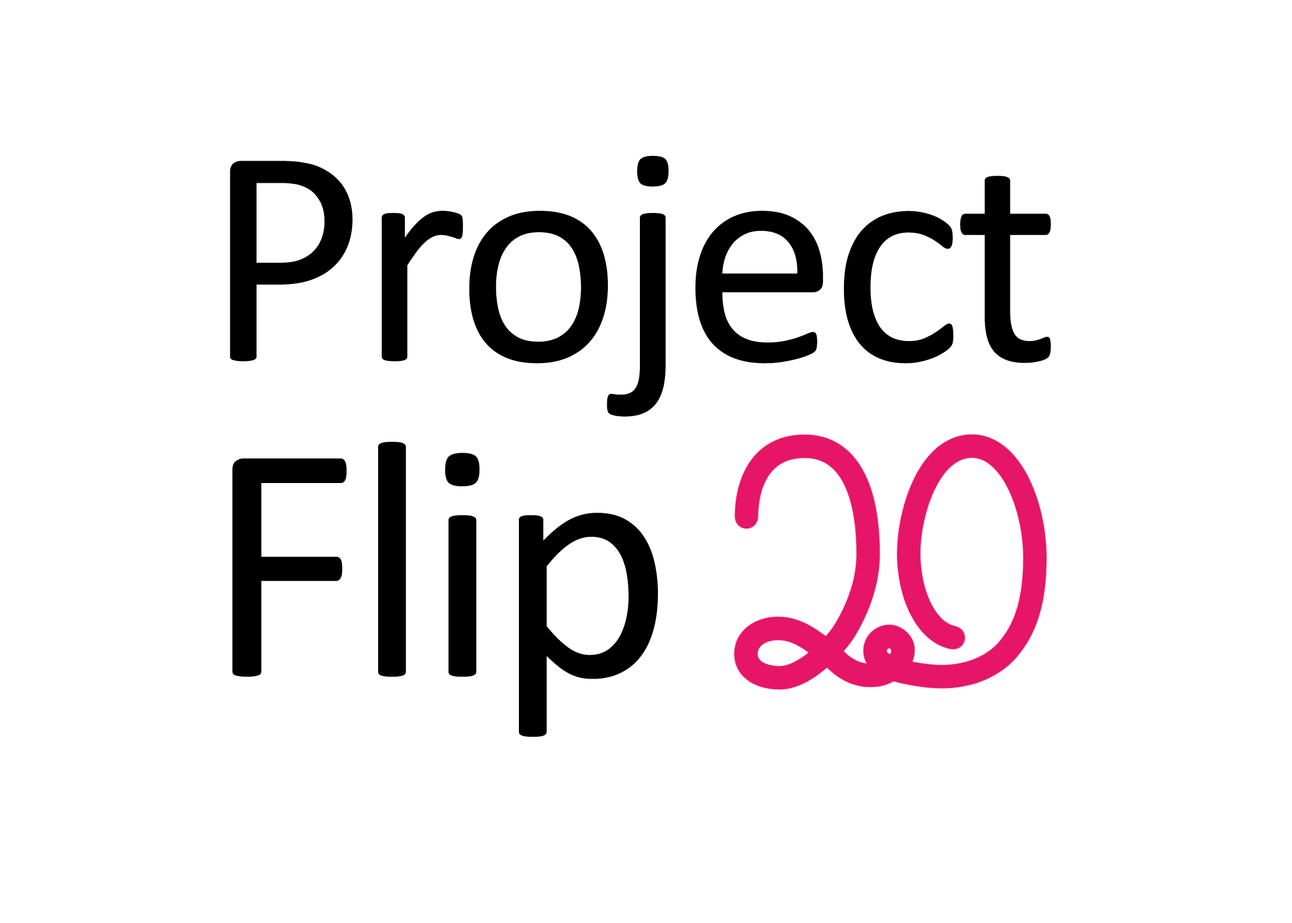
<style>
.page{position:relative;width:1292px;height:923px;background:#ffffff}
.page>*{position:absolute;margin:0}
.t1{font:315.2px/315.2px "Calibri";letter-spacing:-0.025em;color:#000000}
.t2{font:343.6px/315.2px "Calibri";letter-spacing:-0.025em;color:#000000}
</style>
<div class="page">
<p class="t1" style="left:230px;top:155px;width:821px;height:582px">Project<br><span class="t2">Flip</span></p>
</div>
